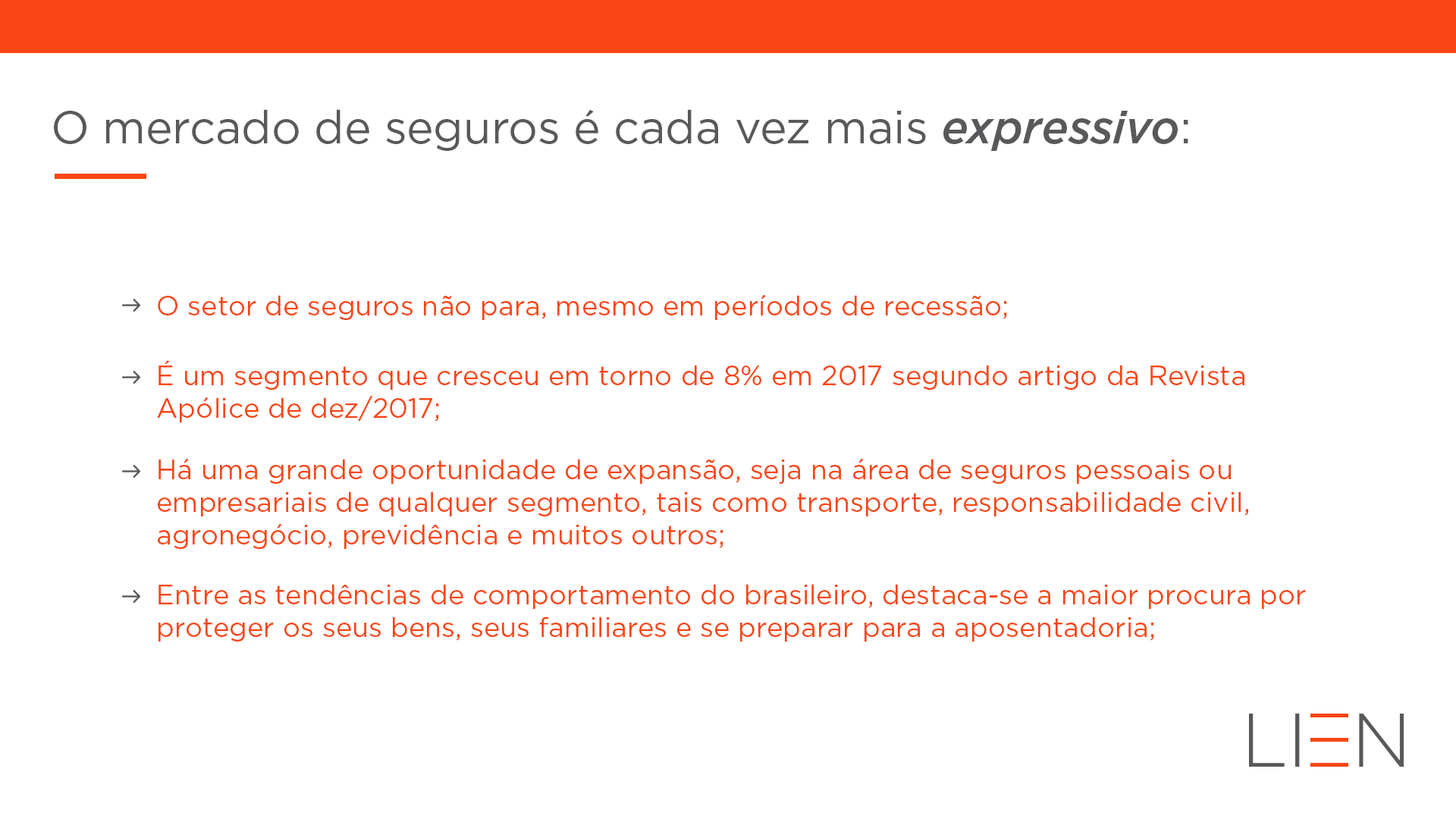
<style>
.page{position:relative;width:1456px;height:819px;background:#ffffff}
.page>*{position:absolute;margin:0}
.t1{font:45.5px "Gotham-Book";letter-spacing:-0.005em;color:#58595b}
.t2{font:45.5px "Gotham-MediumItalic";letter-spacing:-0.005em;color:#58595b}
.t3{font:27.3px "Gotham-Book";color:#f94615}
</style>
<div class="page">
<p class="t1" style="left:54px;top:109px;width:1134px;height:42px">O mercado de seguros é cada vez mais <span class="t2">expressivo</span>:</p>
<p class="t3" style="left:158px;top:294px;width:849px;height:26px">O setor de seguros não para, mesmo em períodos de recessão;</p>
<p class="t3" style="left:157px;top:360px;width:1087px;height:62px">É um segmento que cresceu em torno de 8% em 2017 segundo artigo da Revista Apólice de dez/2017;</p>
<p class="t3" style="left:158px;top:458px;width:1090px;height:91px">Há uma grande oportunidade de expansão, seja na área de seguros pessoais ou empresariais de qualquer segmento, tais como transporte, responsabilidade civil, agronegócio, previdência e muitos outros;</p>
<p class="t3" style="left:158px;top:584px;width:1148px;height:58px">Entre as tendências de comportamento do brasileiro, destaca-se a maior procura por proteger os seus bens, seus familiares e se preparar para a aposentadoria;</p>
</div>
